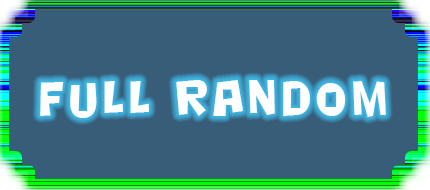
<style>
.page{position:relative;width:430px;height:190px;background:#385d79}
.page>*{position:absolute;margin:0}
.t1{font:48px "NightclubBTN";letter-spacing:0.12em;color:#ffffff;scale:0.91 1}
</style>
<div class="page">
<p class="t1" style="left:40px;top:80px;width:346px;height:38px">Full Random</p>
</div>
